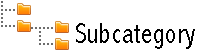
<style>
.page{position:relative;width:200px;height:50px;background:#ffffff}
.page>*{position:absolute;margin:0}
.t1{font:29.2px "AbadiMT-CondensedLight";color:#000000}
</style>
<div class="page">
<p class="t1" style="left:76px;top:23px;width:119px;height:26px">Subcategory</p>
</div>
